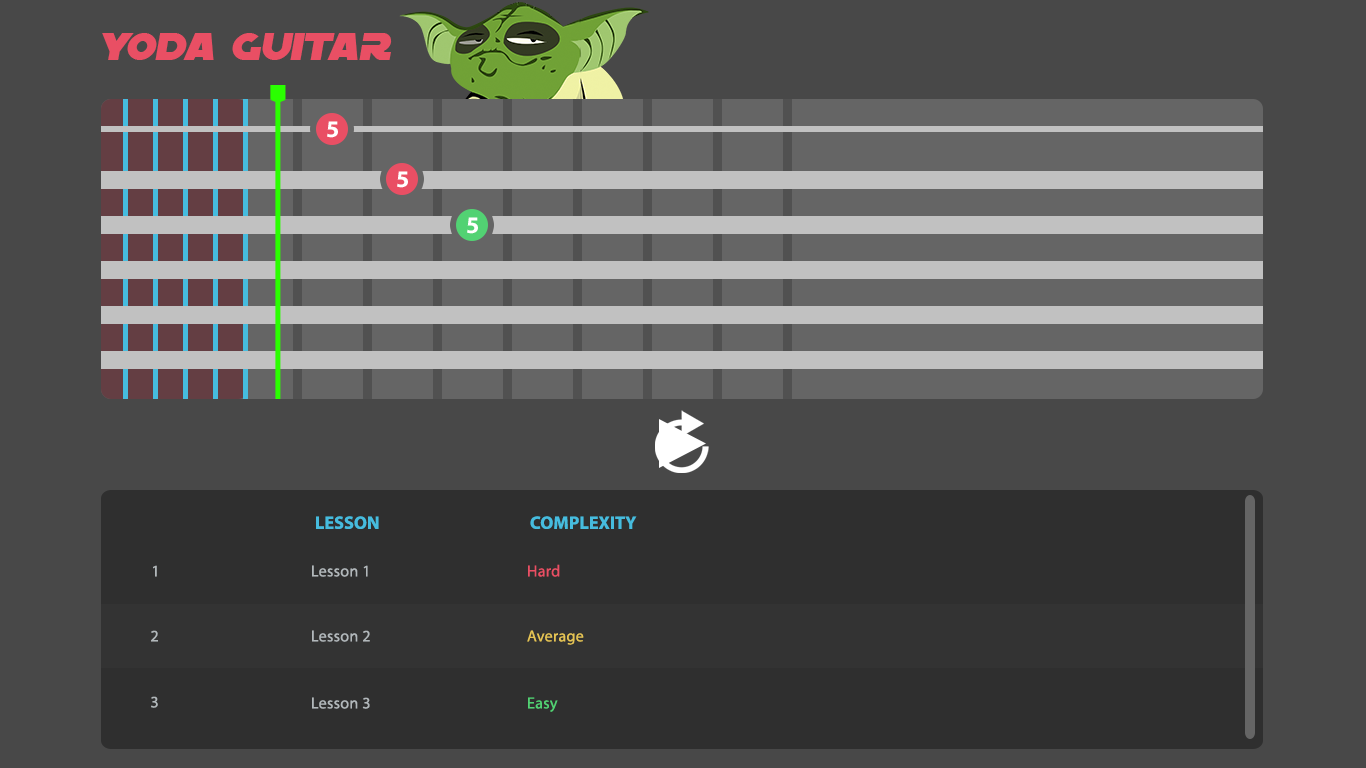
<style>
.page{position:relative;width:1366px;height:768px;background:#484848}
.page>*{position:absolute;margin:0}
.t1{font:40px "SFDistantGalaxy-Italic";color:#e94f64;text-transform:uppercase}
.t2{font:24px "MyriadPro-Bold";letter-spacing:0.01em;color:#ffffff}
.t3{font:18px "MyriadPro-Bold";letter-spacing:0.01em;color:#46bcde}
.t4{font:16px "MyriadPro-Regular";letter-spacing:0.02em;color:#b2b8bb}
.t5{font:16px "MyriadPro-Regular";letter-spacing:0.02em;color:#e94f64}
.t6{font:16px "MyriadPro-Regular";letter-spacing:0.02em;color:#e5c454}
.t7{font:16px "MyriadPro-Regular";letter-spacing:0.02em;color:#52d273}
</style>
<div class="page">
<p class="t1" style="left:102px;top:33px;width:290px;height:27px">YODA GUITAR</p>
<p class="t2" style="left:327px;top:121px;width:11px;height:17px">5</p>
<p class="t2" style="left:397px;top:171px;width:11px;height:17px">5</p>
<p class="t2" style="left:467px;top:217px;width:11px;height:17px">5</p>
<p class="t3" style="left:316px;top:516px;width:63px;height:13px">LESSON</p>
<p class="t3" style="left:530px;top:516px;width:107px;height:13px">COMPLEXITY</p>
<p class="t4" style="left:153px;top:565px;width:4px;height:12px">1</p>
<p class="t4" style="left:312px;top:565px;width:56px;height:12px">Lesson 1</p>
<p class="t5" style="left:528px;top:564px;width:32px;height:13px">Hard</p>
<p class="t4" style="left:151px;top:630px;width:7px;height:12px">2</p>
<p class="t4" style="left:312px;top:630px;width:58px;height:12px">Lesson 2</p>
<p class="t6" style="left:527px;top:630px;width:57px;height:15px">Average</p>
<p class="t4" style="left:151px;top:696px;width:7px;height:12px">3</p>
<p class="t4" style="left:312px;top:697px;width:58px;height:12px">Lesson 3</p>
<p class="t7" style="left:528px;top:697px;width:30px;height:15px">Easy</p>
</div>
